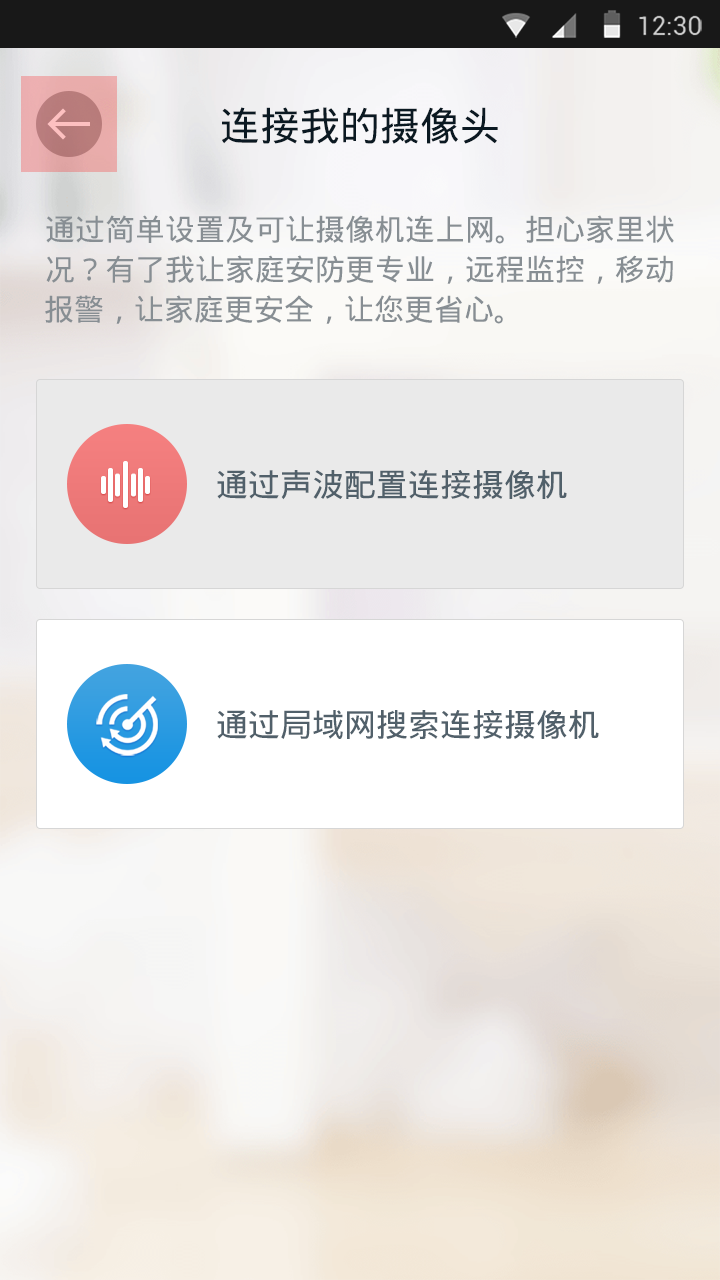
<style>
.page{position:relative;width:720px;height:1280px}
.page>*{position:absolute;margin:0}
.t1{font:40px "DroidSansFallback";color:#0b1922}
.t2{font:30px "DroidSansFallback";color:#878e93}
.t3{font:32px "DroidSansFallback";color:#51606a}
</style>
<div class="page">
<p class="t1" style="left:222px;top:107px;width:276px;height:37px">连接我的摄像头</p>
<p class="t2" style="left:46px;top:215px;width:628px;height:29px">通过简单设置及可让摄像机连上网。担心家里状</p>
<p class="t2" style="left:46px;top:255px;width:627px;height:29px">况？有了我让家庭安防更专业，远程监控，移动</p>
<p class="t2" style="left:45px;top:295px;width:458px;height:29px">报警，让家庭更安全，让您更省心。</p>
<p class="t3" style="left:217px;top:470px;width:350px;height:30px">通过声波配置连接摄像机</p>
<p class="t3" style="left:217px;top:710px;width:382px;height:30px">通过局域网搜索连接摄像机</p>
</div>
